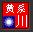
<style>
.page{position:relative;width:33px;height:32px;background:#f20000}
.page>*{position:absolute;margin:0}
.t1{font:10.4px "SimSun";color:#ffffff}
.t2{font:11.7px "SimSun";color:#ffffff}
</style>
<div class="page">
<p class="t1" style="left:6px;top:4px;width:19px;height:9px">黄系</p>
<p class="t2" style="left:16px;top:15px;width:11px;height:12px">川</p>
</div>
